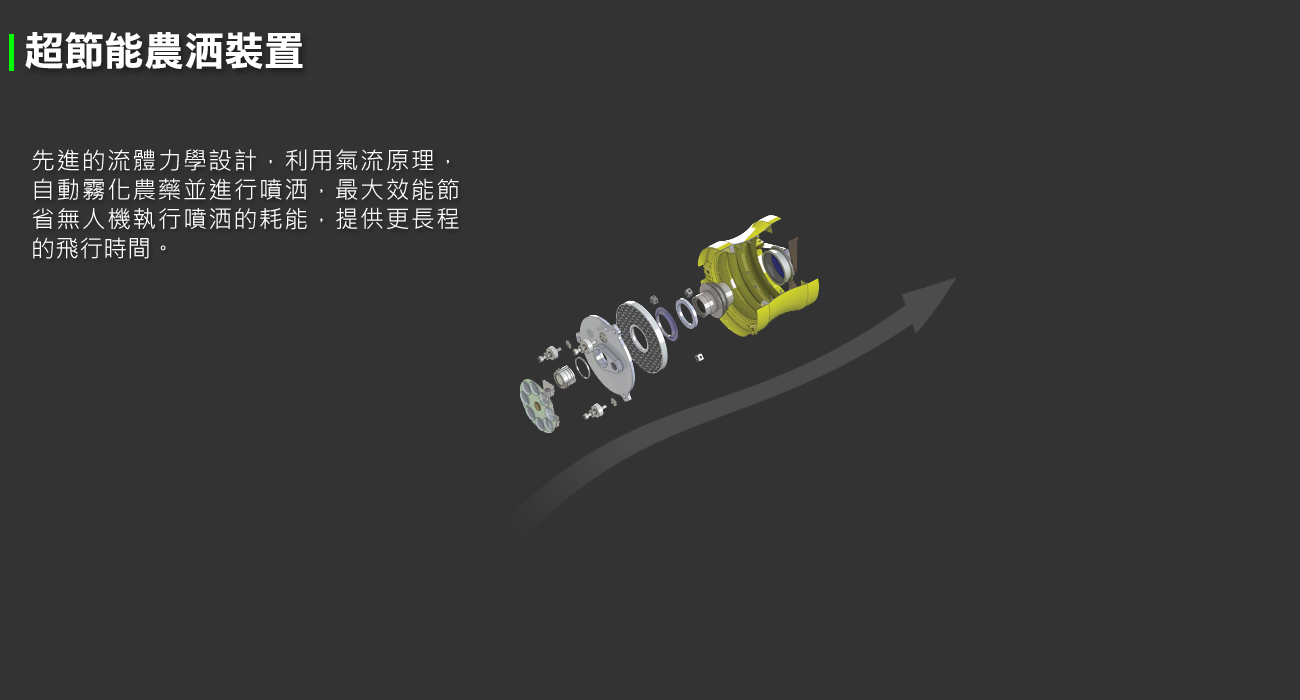
<style>
.page{position:relative;width:1300px;height:700px;background:#333333}
.page>*{position:absolute;margin:0}
.t1{font:40px "DFLiHei-Bd-WIN-BF";color:#ffffff}
.t2{font:24px/29.3px "MicrosoftJhengHeiRegular";color:#ffffff}
</style>
<div class="page">
<p class="t1" style="left:25px;top:32px;width:278px;height:37px">超節能農洒裝置</p>
<p class="t2" style="left:32px;top:149px;width:427px;height:110px;text-align:justify">先進的流體力學設計，利用氣流原理，自動霧化農藥並進行噴洒，最大效能節省無人機執行噴洒的耗能，提供更長程的飛行時間。</p>
</div>
